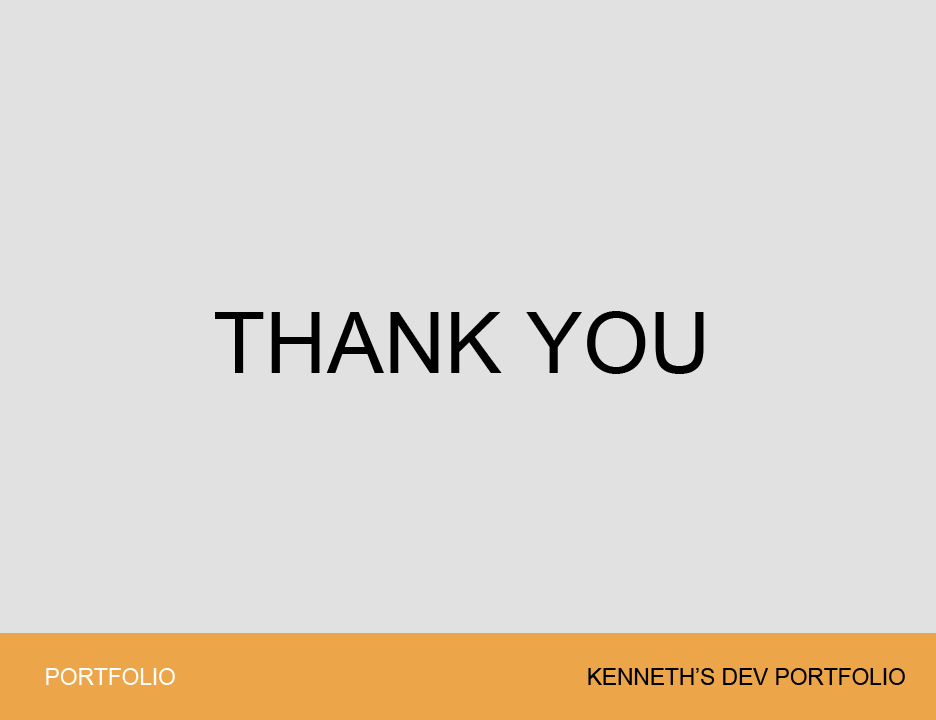
<style>
.page{position:relative;width:936px;height:720px;background:#e1e1e1}
.page>*{position:absolute;margin:0}
.t1{font:85.3px "ArialMT";color:#000000}
.t2{font:22.7px "ArialMT";color:#ffffff}
.t3{font:22.7px "ArialMT";color:#000000}
</style>
<div class="page">
<p class="t1" style="left:215px;top:311px;width:489px;height:63px">THANK YOU</p>
<p class="t2" style="left:46px;top:668px;width:129px;height:17px">PORTFOLIO</p>
<p class="t3" style="left:588px;top:668px;width:317px;height:17px">KENNETH’S DEV PORTFOLIO</p>
</div>
